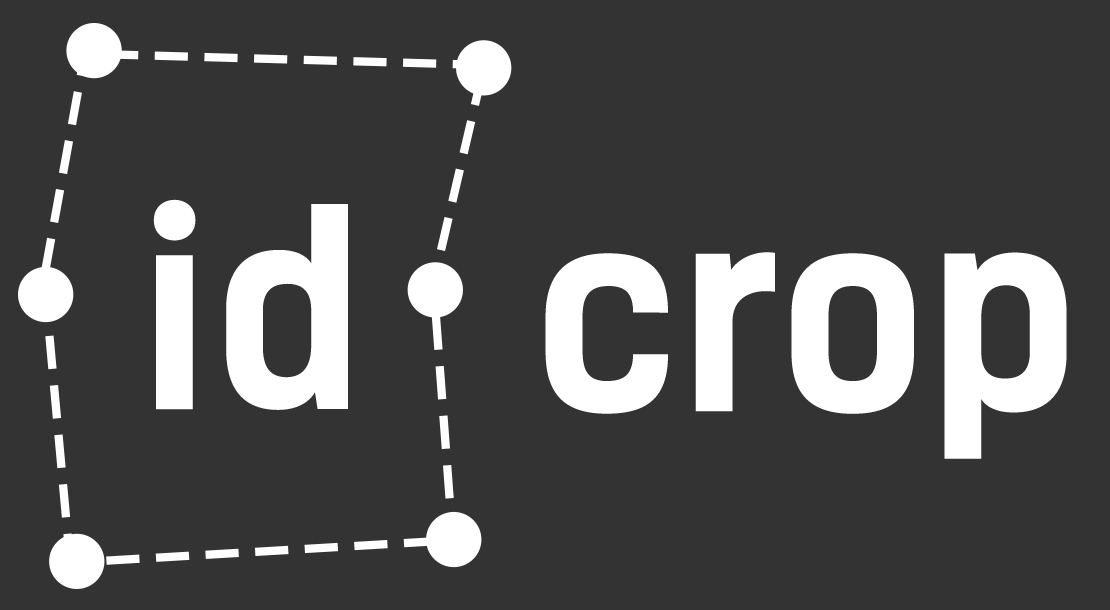
<style>
.page{position:relative;width:1110px;height:610px;background:#333333}
.page>*{position:absolute;margin:0}
.t1{font:266.2px "KelsonSans-Bold";color:#ffffff}
</style>
<div class="page">
<p class="t1" style="left:153px;top:199px;width:195px;height:211px">id</p>
<p class="t1" style="left:545px;top:252px;width:522px;height:207px">crop</p>
</div>
